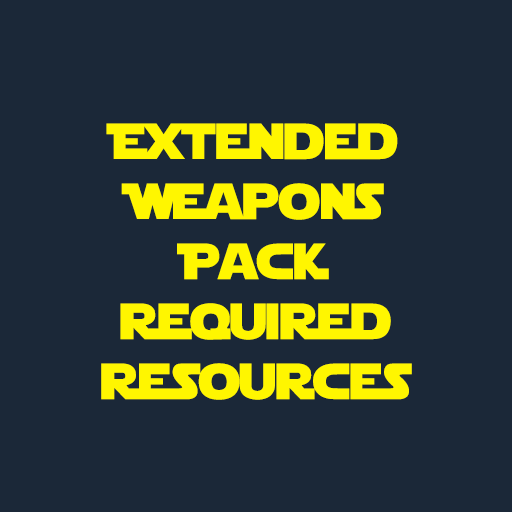
<style>
.page{position:relative;width:512px;height:512px;background:#1b2838}
.page>*{position:absolute;margin:0}
.t1{font:50px "StarJedi";color:#fff600}
</style>
<div class="page">
<p class="t1" style="left:101px;top:123px;width:311px;height:277px;text-align:center">Extended<br>Weapons<br>Pack<br>Required<br>Resources</p>
</div>
